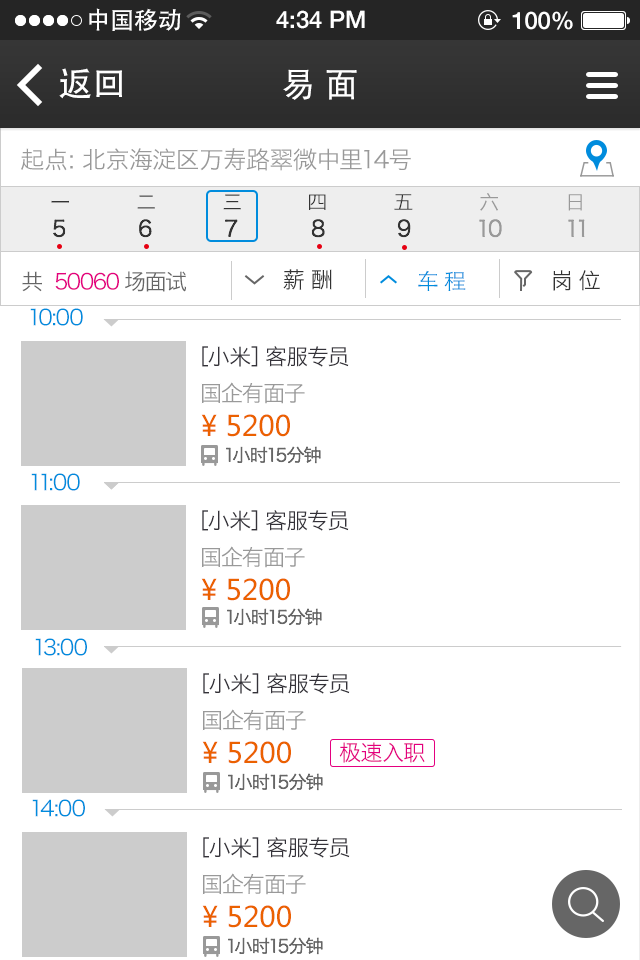
<style>
.page{position:relative;width:640px;height:960px;background:#ffffff}
.page>*{position:absolute;margin:0}
.t1{font:24px "AdobeHeitiStd-Regular";color:#ffffff}
.t2{font:24px "HelveticaNeue-Medium";color:#ffffff}
.t3{font:34px "AdobeHeitiStd-Regular";color:#ffffff}
.t4{font:34px "STHeitiSC-Light";color:#ffffff;font-weight:bold}
.t5{font:24px "HiraginoSansGB-W3";color:#999999}
.t6{font:20px "HiraginoSansGB-W3"}
.t7{font:20px "HiraginoSansGB-W3";color:#333333}
.t8{font:20px "HiraginoSansGB-W3";color:#999999}
.t9{font:22px "HiraginoSansGB-W3";color:#333333}
.t10{font:22px "HiraginoSansGB-W3";color:#999999}
.t11{font:22px "HiraginoSansGB-W3";letter-spacing:-0.025em;color:#333333}
.t12{font:22px "STHeitiSC-Light";letter-spacing:-0.025em;color:#008cdd}
.t13{font:22px "HiraginoSansGB-W3";letter-spacing:-0.05em;color:#e4007f}
.t14{font:22px "HiraginoSansGB-W3";letter-spacing:-0.05em;color:#666666}
.t15{font:22px "HiraginoSansGB-W3";letter-spacing:-0.025em;color:#008cdd}
.t16{font:22px "HiraginoSansGB-W3";letter-spacing:-0.01em;color:#343239}
.t17{font:22px "HiraginoSansGB-W3";letter-spacing:-0.025em;color:#999999}
.t18{font:28px "MicrosoftYaHei";color:#eb6100}
.t19{font:18px "HiraginoSansGB-W3";letter-spacing:-0.025em;color:#666666}
.t20{font:22px "HiraginoSansGB-W3";letter-spacing:-0.025em;color:#e4007f}
</style>
<div class="page">
<p class="t1" style="left:89px;top:8px;width:92px;height:23px">中国移动</p>
<p class="t2" style="left:276px;top:10px;width:89px;height:19px">4:34 PM</p>
<p class="t2" style="left:512px;top:11px;width:61px;height:19px">100%</p>
<p class="t3" style="left:59px;top:68px;width:63px;height:31px">返回</p>
<p class="t4" style="left:283px;top:69px;width:74px;height:31px">易 面</p>
<p class="t5" style="left:21px;top:148px;width:390px;height:23px">起点：北京海淀区万寿路翠微中里14号</p>
<p class="t6" style="left:137px;top:195px;width:18px;height:14px">二</p>
<p class="t7" style="left:223px;top:194px;width:18px;height:16px">三</p>
<p class="t7" style="left:309px;top:194px;width:17px;height:16px">四</p>
<p class="t7" style="left:394px;top:194px;width:19px;height:16px">五</p>
<p class="t8" style="left:480px;top:193px;width:18px;height:18px">六</p>
<p class="t8" style="left:568px;top:194px;width:14px;height:17px">日</p>
<p class="t7" style="left:51px;top:200px;width:18px;height:3px">一</p>
<p class="t9" style="left:53px;top:219px;width:13px;height:19px">5</p>
<p class="t9" style="left:139px;top:219px;width:13px;height:19px">6</p>
<p class="t9" style="left:225px;top:219px;width:13px;height:18px">7</p>
<p class="t9" style="left:311px;top:219px;width:14px;height:19px">8</p>
<p class="t9" style="left:397px;top:219px;width:14px;height:19px">9</p>
<p class="t10" style="left:479px;top:219px;width:23px;height:19px">10</p>
<p class="t10" style="left:568px;top:219px;width:17px;height:18px">11</p>
<p class="t11" style="left:283px;top:269px;width:49px;height:21px">薪 酬</p>
<p class="t12" style="left:418px;top:270px;width:48px;height:21px">车 程</p>
<p class="t11" style="left:553px;top:270px;width:47px;height:21px">岗 位</p>
<p class="t13" style="left:22px;top:271px;width:164px;height:21px"><span class="t14">共  </span>50060<span class="t14"> 场面试</span></p>
<p class="t15" style="left:30px;top:308px;width:53px;height:18px">10:00</p>
<p class="t16" style="left:202px;top:346px;width:147px;height:21px">［小米］客服专员</p>
<p class="t17" style="left:201px;top:382px;width:104px;height:22px">国企有面子</p>
<p class="t18" style="left:201px;top:414px;width:89px;height:23px">¥ 5200</p>
<p class="t19" style="left:226px;top:446px;width:95px;height:18px">1小时15分钟</p>
<p class="t15" style="left:31px;top:473px;width:49px;height:18px">11:00</p>
<p class="t16" style="left:202px;top:510px;width:147px;height:21px">［小米］客服专员</p>
<p class="t17" style="left:201px;top:546px;width:104px;height:22px">国企有面子</p>
<p class="t18" style="left:201px;top:578px;width:89px;height:23px">¥ 5200</p>
<p class="t19" style="left:227px;top:608px;width:95px;height:18px">1小时15分钟</p>
<p class="t15" style="left:35px;top:638px;width:52px;height:18px">13:00</p>
<p class="t16" style="left:203px;top:673px;width:147px;height:21px">［小米］客服专员</p>
<p class="t17" style="left:202px;top:709px;width:104px;height:22px">国企有面子</p>
<p class="t18" style="left:202px;top:741px;width:89px;height:23px">¥ 5200</p>
<p class="t20" style="left:339px;top:742px;width:86px;height:21px">极速入职</p>
<p class="t19" style="left:228px;top:773px;width:95px;height:18px">1小时15分钟</p>
<p class="t15" style="left:32px;top:799px;width:53px;height:18px">14:00</p>
<p class="t16" style="left:203px;top:837px;width:147px;height:21px">［小米］客服专员</p>
<p class="t17" style="left:202px;top:873px;width:104px;height:22px">国企有面子</p>
<p class="t18" style="left:202px;top:905px;width:89px;height:23px">¥ 5200</p>
<p class="t19" style="left:228px;top:937px;width:95px;height:18px">1小时15分钟</p>
</div>
